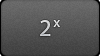
<style>
.page{position:relative;width:100px;height:56px}
.page>*{position:absolute;margin:0}
.t1{font:24px "MyriadPro-Regular";letter-spacing:0.1em;color:#cecfd1}
</style>
<div class="page">
<p class="t1" style="left:40px;top:20px;width:20px;height:16px">2x</p>
</div>
